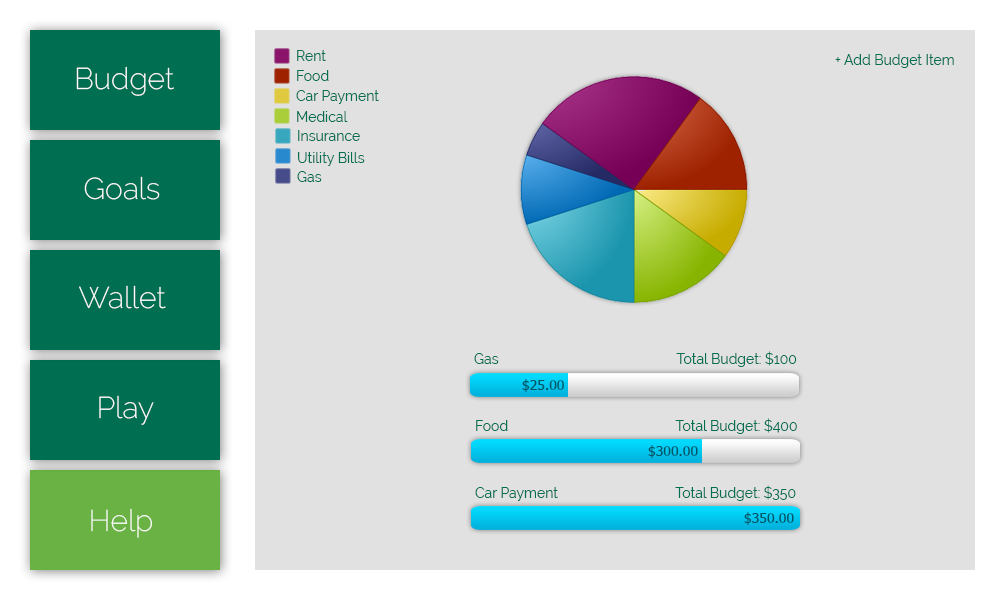
<style>
.page{position:relative;width:1000px;height:600px;background:#e1e1e1}
.page>*{position:absolute;margin:0}
.t1{font:14px "Raleway-Regular";color:#006e51}
.t2{font:30px "Raleway-ExtraLight";color:#ffffff}
.t3{font:14px "Tahoma";color:#015566}
</style>
<div class="page">
<p class="t1" style="left:297px;top:50px;width:29px;height:11px">Rent</p>
<p class="t1" style="left:835px;top:54px;width:119px;height:14px">+ Add Budget Item</p>
<p class="t2" style="left:76px;top:66px;width:98px;height:30px">Budget</p>
<p class="t1" style="left:297px;top:70px;width:32px;height:11px">Food</p>
<p class="t1" style="left:296px;top:90px;width:83px;height:14px">Car Payment</p>
<p class="t1" style="left:297px;top:111px;width:51px;height:11px">Medical</p>
<p class="t1" style="left:298px;top:130px;width:62px;height:11px">Insurance</p>
<p class="t1" style="left:298px;top:152px;width:67px;height:14px">Utility Bills</p>
<p class="t1" style="left:297px;top:171px;width:25px;height:11px">Gas</p>
<p class="t2" style="left:84px;top:176px;width:76px;height:24px">Goals</p>
<p class="t2" style="left:79px;top:285px;width:87px;height:24px">Wallet</p>
<p class="t1" style="left:474px;top:351px;width:323px;height:16px">Gas                                                  Total Budget: $100</p>
<p class="t3" style="left:522px;top:379px;width:42px;height:13px">$25.00</p>
<p class="t2" style="left:99px;top:395px;width:55px;height:30px">Play</p>
<p class="t1" style="left:476px;top:418px;width:321px;height:16px">Food                                               Total Budget: $400</p>
<p class="t3" style="left:648px;top:445px;width:50px;height:13px">$300.00</p>
<p class="t1" style="left:475px;top:485px;width:321px;height:16px">Car Payment                                 Total Budget: $350</p>
<p class="t2" style="left:91px;top:508px;width:62px;height:30px">Help</p>
<p class="t3" style="left:744px;top:512px;width:50px;height:13px">$350.00</p>
</div>
